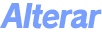
<style>
.page{position:relative;width:102px;height:32px;background:#ffffff}
.page>*{position:absolute;margin:0}
.t1{font:32px "RodinPro-EB";letter-spacing:-0.044em;color:#789ffe;font-style:italic;scale:0.93 1}
</style>
<div class="page">
<p class="t1" style="left:0px;top:3px;width:102px;height:26px">Alterar</p>
</div>
